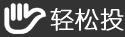
<style>
.page{position:relative;width:125px;height:37px;background:#333333}
.page>*{position:absolute;margin:0}
.t1{font:24px "YouYuan";color:#ffffff;font-weight:bold}
</style>
<div class="page">
<p class="t1" style="left:50px;top:8px;width:74px;height:23px">轻松投</p>
</div>
